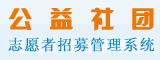
<style>
.page{position:relative;width:160px;height:60px;background:#eef6fc}
.page>*{position:absolute;margin:0}
.t1{font:24px "HYk2gj";letter-spacing:0.075em;color:#ed7703;font-weight:bold}
.t2{font:15px "SimSun";letter-spacing:0.075em;color:#0e8aca;font-weight:bold}
</style>
<div class="page">
<p class="t1" style="left:9px;top:7px;width:145px;height:24px">公 益 社 团</p>
<p class="t2" style="left:8px;top:37px;width:147px;height:15px">志愿者招募管理系统</p>
</div>
